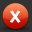
<style>
.page{position:relative;width:32px;height:32px;background:#333333}
.page>*{position:absolute;margin:0}
.t1{font:24px "OfficinaSansStd-Bold";letter-spacing:0.012em;color:#ffffff}
</style>
<div class="page">
<p class="t1" style="left:9px;top:10px;width:12px;height:13px">x</p>
</div>
